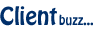
<style>
.page{position:relative;width:93px;height:33px;background:#ffffff}
.page>*{position:absolute;margin:0}
.t1{font:22px "HoboStd";color:#002f6a}
.t2{font:12px "HoboStd";color:#002f6a}
</style>
<div class="page">
<p class="t1" style="left:0px;top:6px;width:57px;height:20px">Client</p>
<p class="t2" style="left:59px;top:14px;width:35px;height:12px">buzz...</p>
</div>
